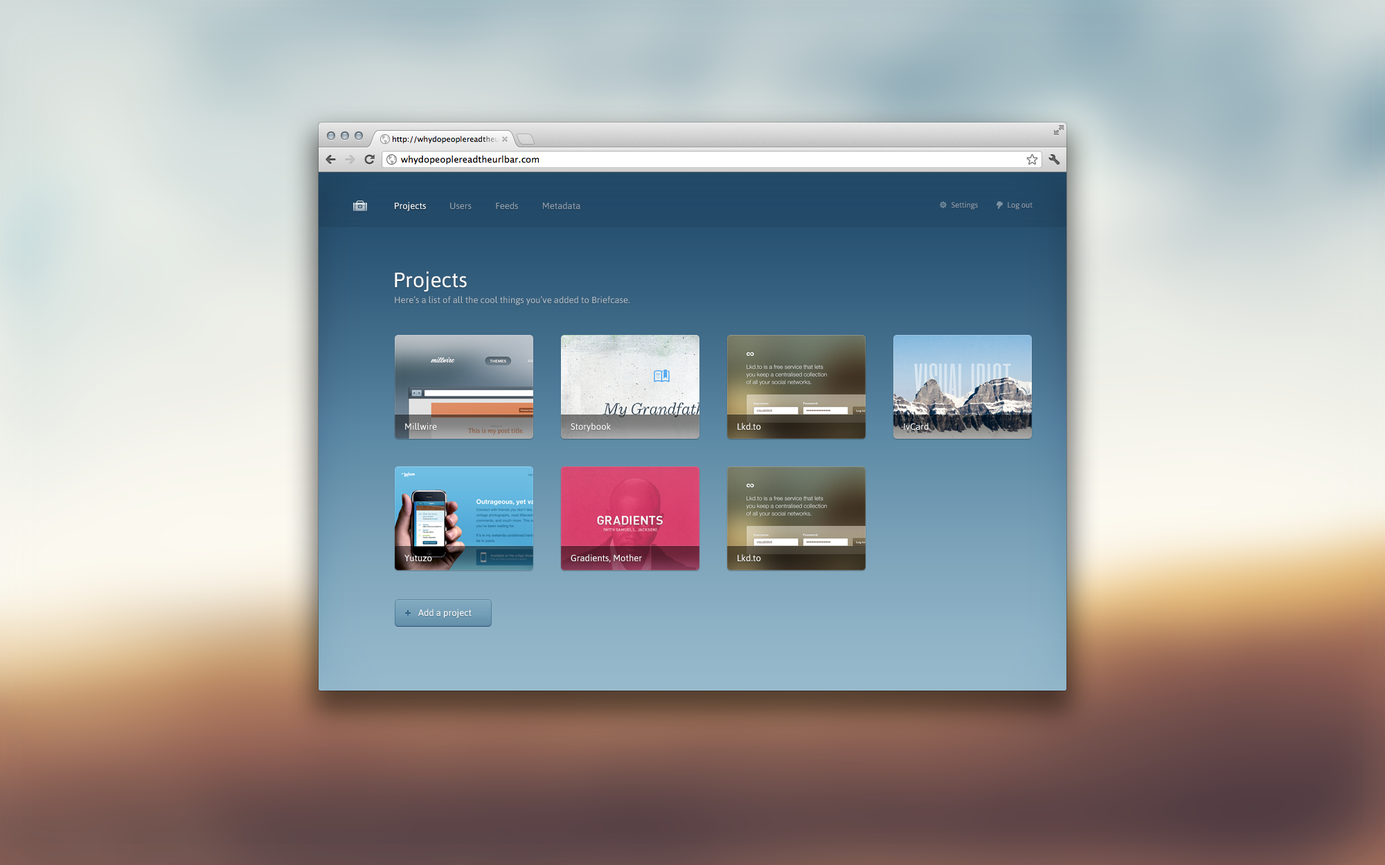
<style>
.page{position:relative;width:1385px;height:865px}
.page>*{position:absolute;margin:0}
.t1{font:9px "Asap-Regular";color:#ffffff}
.t2{font:9px "Asap-Regular";color:#95a2ae}
.t3{font:7.6px "Asap-Regular";color:#95a1ae}
.t4{font:20.8px "Asap-Regular";color:#ffffff}
.t5{font:9px "Asap-Regular";color:#afbbc7}
</style>
<div class="page">
<p class="t1" style="left:395px;top:202px;width:31px;height:9px">Projects</p>
<p class="t2" style="left:450px;top:202px;width:130px;height:7px">Users           Feeds           Metadata</p>
<p class="t3" style="left:951px;top:201px;width:81px;height:9px">Settings                Log out</p>
<p class="t4" style="left:395px;top:271px;width:72px;height:21px">Projects</p>
<p class="t5" style="left:395px;top:296px;width:234px;height:9px">Here’s a list of all the cool things you’ve added to Briefcase.</p>
<p class="t1" style="left:405px;top:423px;width:32px;height:7px">Millwire</p>
<p class="t1" style="left:570px;top:423px;width:41px;height:9px">Storybook</p>
<p class="t1" style="left:737px;top:423px;width:24px;height:7px">Lkd.to</p>
<p class="t1" style="left:903px;top:423px;width:25px;height:7px">!vCard</p>
<p class="t1" style="left:404px;top:555px;width:28px;height:6px">Yutuzo</p>
<p class="t1" style="left:570px;top:555px;width:72px;height:8px">Gradients, Mother</p>
<p class="t1" style="left:737px;top:555px;width:24px;height:6px">Lkd.to</p>
<p class="t1" style="left:418px;top:609px;width:53px;height:9px">Add a project</p>
</div>
